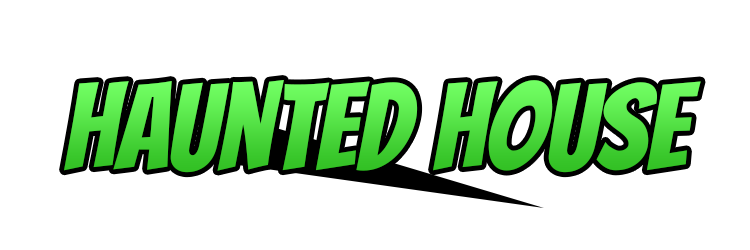
<style>
.page{position:relative;width:750px;height:250px;background:#ffffff}
.page>*{position:absolute;margin:0}
.t1{font:120px "Bangers-Regular"}
</style>
<div class="page">
<p class="t1" style="left:64px;top:80px;width:637px;height:93px">Haunted House</p>
</div>
